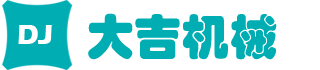
<style>
.page{position:relative;width:320px;height:70px;background:#ffffff}
.page>*{position:absolute;margin:0}
.t1{font:48px "STHupo";color:#00adb3}
.t2{font:28px "ErasITC-Bold";color:#ffffff}
</style>
<div class="page">
<p class="t1" style="left:88px;top:13px;width:189px;height:47px">大吉机械</p>
<p class="t2" style="left:18px;top:25px;width:34px;height:19px">DJ</p>
</div>
